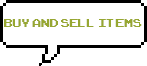
<style>
.page{position:relative;width:147px;height:66px;background:#ffffff}
.page>*{position:absolute;margin:0}
.t1{font:16px "ArcadeClassic";color:#97a732}
</style>
<div class="page">
<p class="t1" style="left:4px;top:19px;width:138px;height:8px">buy and sell items</p>
</div>
